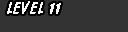
<style>
.page{position:relative;width:128px;height:32px;background:#333333}
.page>*{position:absolute;margin:0}
.t1{font:18px "DomDiagonalBT-Regular";letter-spacing:0.05em;color:#fbfbfb}
</style>
<div class="page">
<p class="t1" style="left:7px;top:1px;width:54px;height:13px">LEVEL 11</p>
</div>
